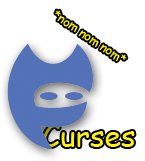
<style>
.page{position:relative;width:145px;height:161px;background:#ffffff}
.page>*{position:absolute;margin:0}
.t1{font:12px "ComicSansMS";color:#fff600}
.t2{font:30px "ComicSansMS";color:#fff600}
</style>
<div class="page">
<p class="t1" style="left:55px;top:10px;width:72px;height:52px;rotate:34deg">*nom nom nom*</p>
<p class="t2" style="left:43px;top:124px;width:92px;height:23px">Curses</p>
</div>
